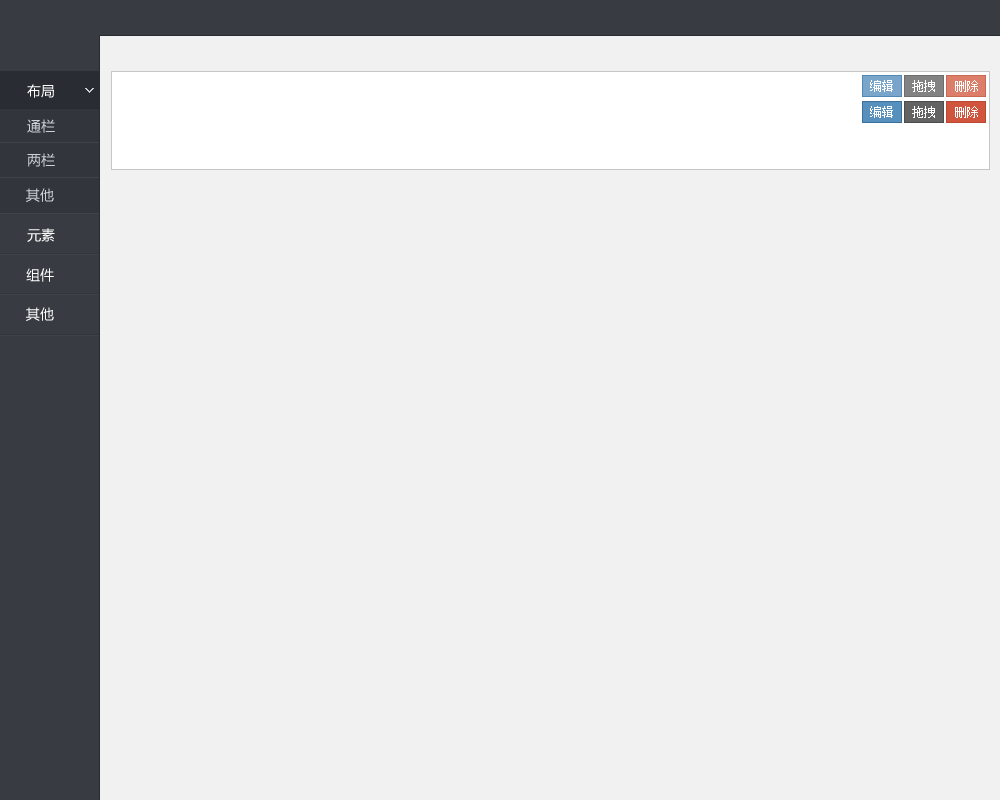
<style>
.page{position:relative;width:1000px;height:800px;background:#f1f1f1}
.page>*{position:absolute;margin:0}
.t1{font:14px "MicrosoftYaHei";color:#ffffff}
.t2{font:12px "SimSun";color:#ffffff}
.t3{font:14px "MicrosoftYaHei";color:#ced2d9}
</style>
<div class="page">
<p class="t1" style="left:27px;top:84px;width:27px;height:14px">布局</p>
<p class="t2" style="left:870px;top:80px;width:23px;height:12px">编辑</p>
<p class="t2" style="left:912px;top:80px;width:23px;height:12px">拖拽</p>
<p class="t2" style="left:955px;top:80px;width:23px;height:12px">删除</p>
<p class="t2" style="left:870px;top:106px;width:23px;height:12px">编辑</p>
<p class="t2" style="left:912px;top:106px;width:23px;height:12px">拖拽</p>
<p class="t2" style="left:955px;top:106px;width:23px;height:12px">删除</p>
<p class="t3" style="left:27px;top:119px;width:28px;height:14px">通栏</p>
<p class="t3" style="left:27px;top:153px;width:28px;height:14px">两栏</p>
<p class="t3" style="left:26px;top:188px;width:28px;height:14px">其他</p>
<p class="t1" style="left:27px;top:228px;width:28px;height:14px">元素</p>
<p class="t1" style="left:26px;top:268px;width:28px;height:14px">组件</p>
<p class="t1" style="left:26px;top:307px;width:28px;height:14px">其他</p>
</div>
